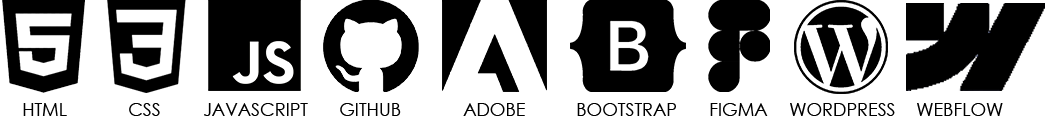
<style>
.page{position:relative;width:1045px;height:128px;background:#ffffff}
.page>*{position:absolute;margin:0}
.t1{font:18px "CenturyGothic";color:#000000}
</style>
<div class="page">
<p class="t1" style="left:23px;top:103px;width:44px;height:13px">HTML</p>
<p class="t1" style="left:129px;top:103px;width:31px;height:13px">CSS</p>
<p class="t1" style="left:204px;top:103px;width:104px;height:13px">JAVASCRIPT</p>
<p class="t1" style="left:340px;top:103px;width:61px;height:13px">GITHUB</p>
<p class="t1" style="left:463px;top:103px;width:62px;height:13px">ADOBE</p>
<p class="t1" style="left:577px;top:103px;width:99px;height:13px">BOOTSTRAP</p>
<p class="t1" style="left:710px;top:103px;width:58px;height:13px">FIGMA</p>
<p class="t1" style="left:790px;top:103px;width:105px;height:13px">WORDPRESS</p>
<p class="t1" style="left:917px;top:103px;width:86px;height:13px">WEBFLOW</p>
</div>
